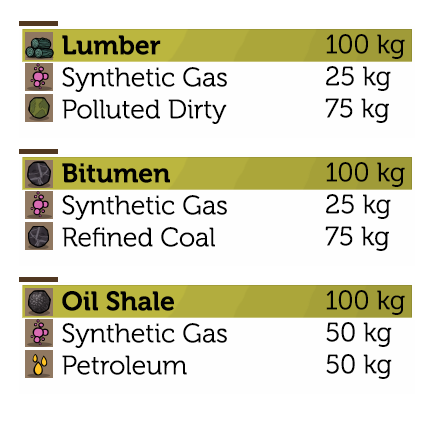
<style>
.page{position:relative;width:440px;height:430px;background:#fefefe}
.page>*{position:absolute;margin:0}
.t1{font:26.7px "Museo-300";color:#000000}
.t2{font:26.7px "Museo-700";color:#000000}
</style>
<div class="page">
<p class="t1" style="left:62px;top:35px;width:165px;height:340px"><span class="t2">Lumber<br></span>Synthetic Gas<br>Polluted Dirty<br><br><span class="t2">Bitumen<br></span>Synthetic Gas<br>Refined Coal<br><br><span class="t2">Oil Shale<br></span>Synthetic Gas<br>Petroleum</p>
<p class="t1" style="left:325px;top:34px;width:80px;height:345px">100 kg<br>25 kg<br>75 kg<br><br>100 kg<br>25 kg<br>75 kg<br><br>100 kg<br>50 kg<br>50 kg</p>
</div>
